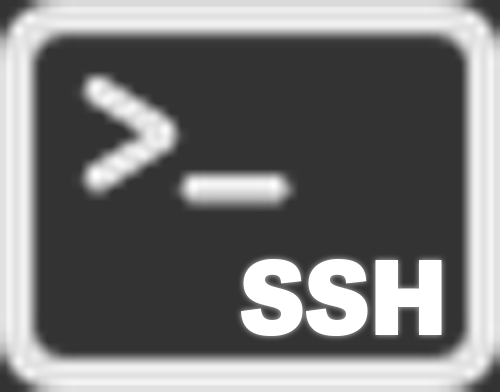
<style>
.page{position:relative;width:500px;height:392px;background:#333333}
.page>*{position:absolute;margin:0}
.t1{font:103.7px "AdelleSansDevanagari-Heavy";color:#ffffff}
</style>
<div class="page">
<p class="t1" style="left:241px;top:259px;width:201px;height:77px">SSH</p>
</div>
